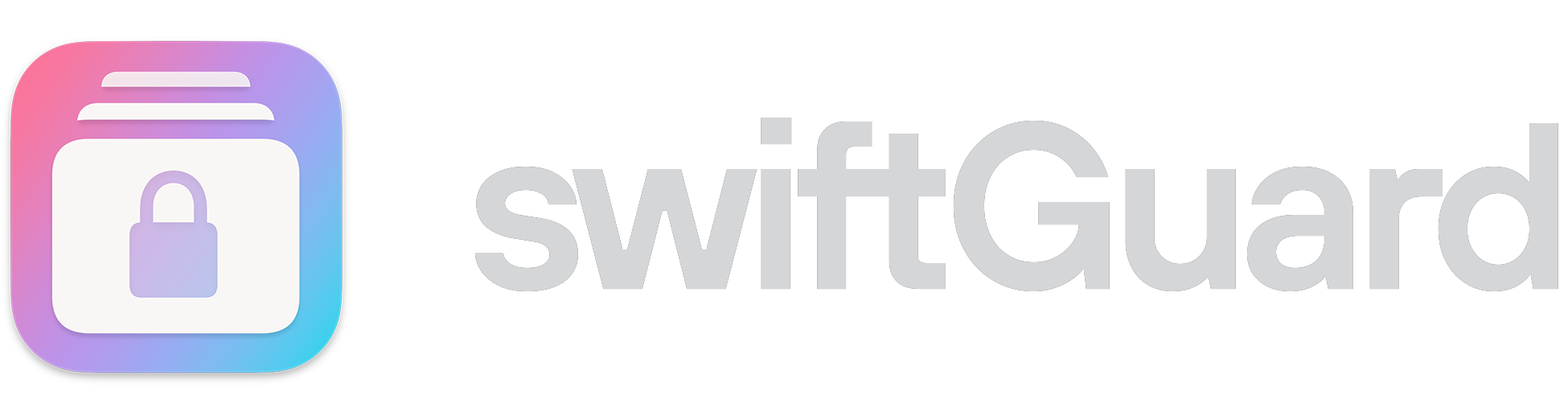
<style>
.page{position:relative;width:1568px;height:412px;background:#ffffff}
.page>*{position:absolute;margin:0}
.t1{font:236.4px "TTHovesProTrialVariable-DemiBold";letter-spacing:-0.055em;color:#d4d6d8}
</style>
<div class="page">
<p class="t1" style="left:474px;top:117px;width:1084px;height:174px">swiftGuard</p>
<p class="t1" style="left:474px;top:117px;width:1084px;height:174px">swiftGuard</p>
</div>
